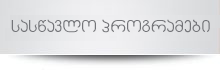
<style>
.page{position:relative;width:220px;height:70px}
.page>*{position:absolute;margin:0}
.t1{font:17px "AvazaMtavruli";color:#747579}
</style>
<div class="page">
<p class="t1" style="left:11px;top:19px;width:199px;height:14px">saswavlo programebi</p>
</div>
